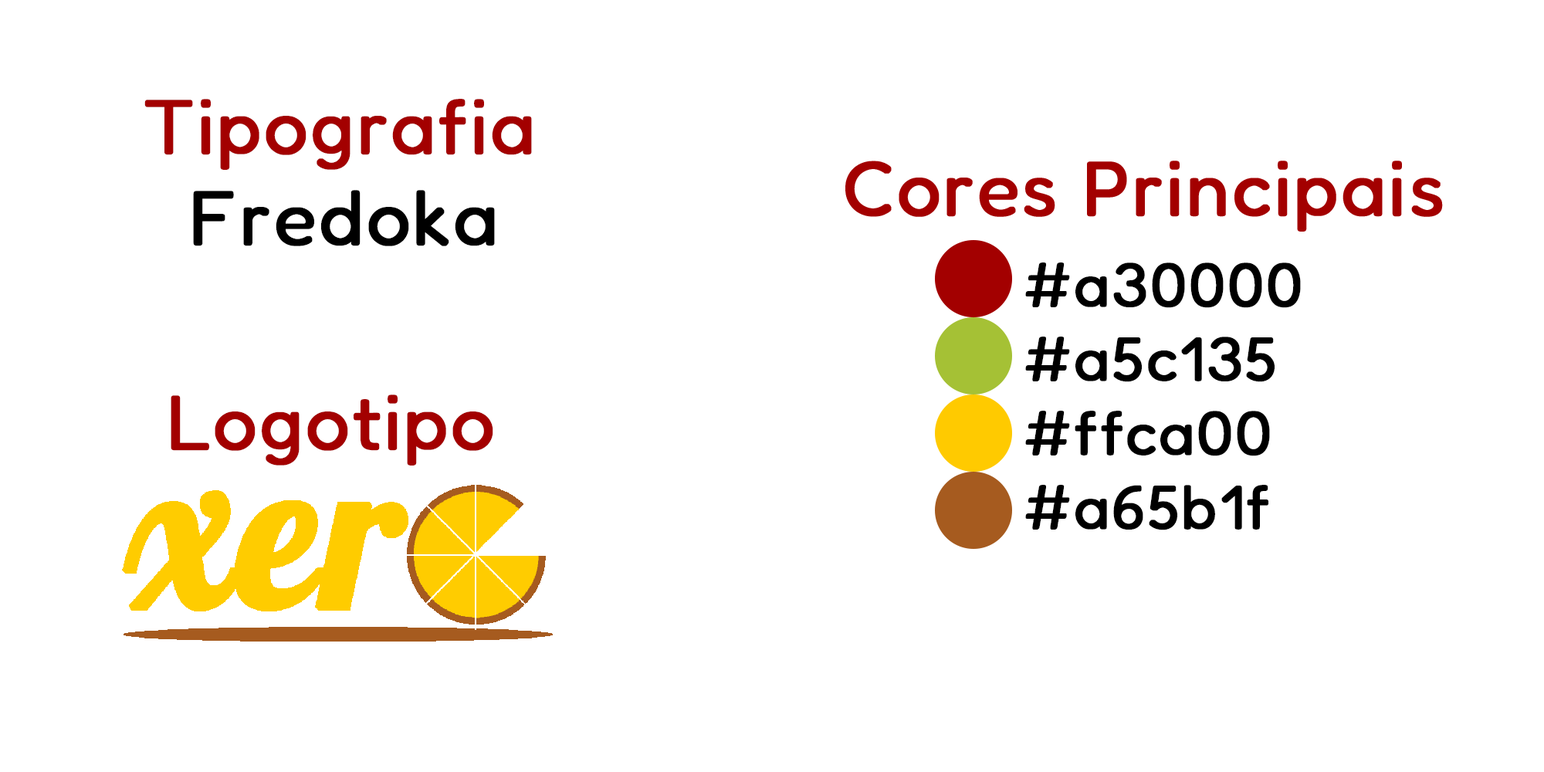
<style>
.page{position:relative;width:1544px;height:772px;background:#ffffff}
.page>*{position:absolute;margin:0}
.t1{font:77.2px "Fredoka-Regular";letter-spacing:0.01em;color:#a30000;font-weight:bold}
.t2{font:77.2px "Fredoka-Regular";letter-spacing:0.01em;color:#000000;font-weight:bold}
.t3{font:61.8px "Fredoka-Regular";letter-spacing:0.01em;color:#000000;font-weight:bold}
</style>
<div class="page">
<p class="t1" style="left:144px;top:99px;width:388px;height:71px">Tipografia</p>
<p class="t2" style="left:193px;top:190px;width:302px;height:56px">Fredoka</p>
<p class="t3" style="left:1025px;top:263px;width:276px;height:267px">#a30000<br>#a5c135<br>#ffca00<br>#a65b1f</p>
<p class="t1" style="left:171px;top:395px;width:322px;height:71px">Logotipo</p>
</div>
